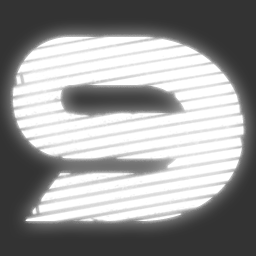
<style>
.page{position:relative;width:256px;height:256px;background:#ffffff}
.page>*{position:absolute;margin:0}
.t1{font:254.7px "Ethnocentric";letter-spacing:0.05em;color:#ffffff;scale:0.95 1}
</style>
<div class="page">
<p class="t1" style="left:13px;top:37px;width:231px;height:184px">9</p>
</div>
